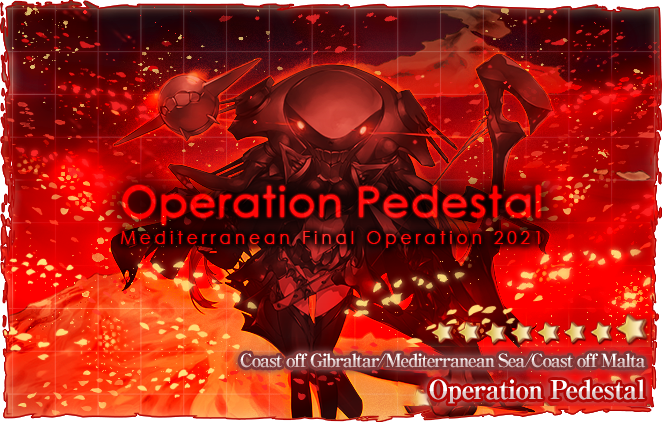
<style>
.page{position:relative;width:662px;height:422px}
.page>*{position:absolute;margin:0}
.t1{font:18px "RyuminPro-ExBold";letter-spacing:-0.08em}
.t2{font:26px "RyuminPro-ExBold";letter-spacing:-0.04em}
</style>
<div class="page">
<p class="t1" style="left:240px;top:353px;width:406px;height:15px">Coast off Gibraltar/Mediterranean Sea/Coast off Malta</p>
<p class="t2" style="left:429px;top:379px;width:216px;height:25px">Operation Pedestal</p>
</div>
